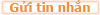
<style>
.page{position:relative;width:100px;height:15px;background:#feebe1}
.page>*{position:absolute;margin:0}
.t1{font:13px "Tahoma-Bold";color:#f1903a}
</style>
<div class="page">
<p class="t1" style="left:10px;top:0px;width:80px;height:12px">Gửi tin nhắn</p>
</div>
